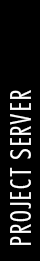
<style>
.page{position:relative;width:40px;height:261px;background:#000000}
.page>*{position:absolute;margin:0}
.t1{font:28px "FuturaStd-CondensedLight";letter-spacing:0.06em;color:#ffffff;text-transform:uppercase}
</style>
<div class="page">
<p class="t1" style="left:10px;top:90px;width:21px;height:155px;rotate:-90deg">Project Server</p>
</div>
